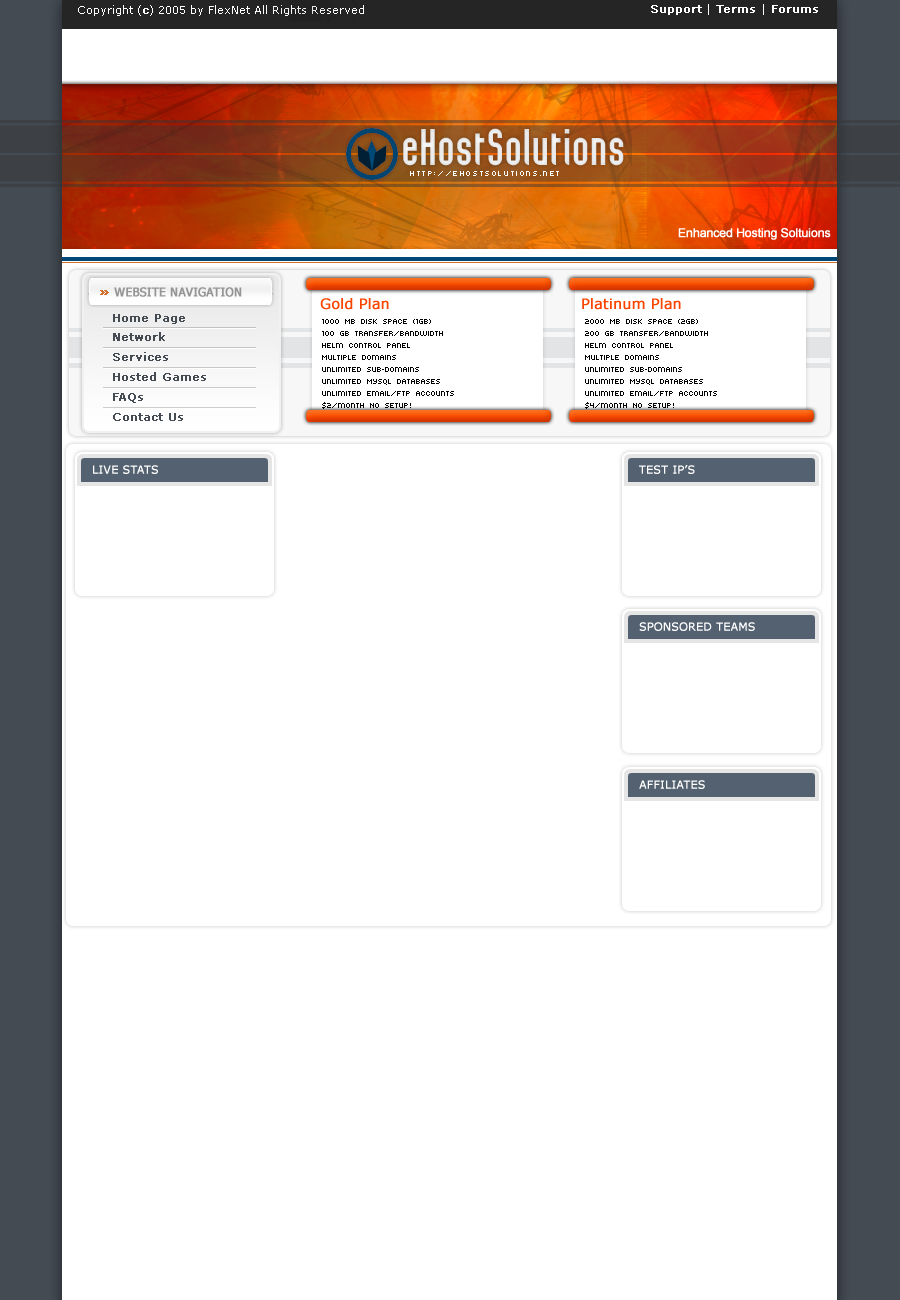
<style>
.page{position:relative;width:900px;height:1300px;background:#ffffff}
.page>*{position:absolute;margin:0}
.t1{font:11px "Verdana";color:#ffffff}
.t2{font:11px "Verdana";color:#ffffff;font-weight:bold}
.t3{font:36px "Roundy-Regular";color:#ffffff}
.t4{font:10px "kroeger 05_55";letter-spacing:0.16em;color:#ffffff}
.t5{font:12px "kroeger 05_55";color:#ffffff;font-weight:bold}
.t6{font:12px "Tahoma";color:#959595;font-weight:bold}
.t7{font:14px "Verdana";color:#fa4400;font-weight:bold}
.t8{font:11px/19.9px "Verdana";color:#444b53;font-weight:bold}
.t9{font:10px "kroeger 05_55";color:#000000}
</style>
<div class="page">
<p class="t1" style="left:78px;top:5px;width:286px;height:11px">Copyright (<span class="t2">c</span>) 2005 by FlexNet All Rights Reserved</p>
<p class="t2" style="left:651px;top:4px;width:167px;height:11px">Support<span class="t1"> |</span> Terms <span class="t1">|</span> Forums</p>
<p class="t3" style="left:403px;top:128px;width:221px;height:38px">eHostSolutions</p>
<p class="t4" style="left:410px;top:171px;width:149px;height:5px">http://ehostsolutions.net</p>
<p class="t5" style="left:678px;top:228px;width:153px;height:12px">Enhanced Hosting Soltuions</p>
<p class="t6" style="left:114px;top:287px;width:128px;height:10px">WEBSITE NAVIGATION</p>
<p class="t7" style="left:320px;top:298px;width:69px;height:12px">Gold Plan</p>
<p class="t7" style="left:582px;top:298px;width:99px;height:12px">Platinum Plan</p>
<p class="t8" style="left:113px;top:314px;width:93px;height:107px">Home Page<br>Network<br>Services<br>Hosted Games<br>FAQs<br>Contact Us</p>
<p class="t9" style="left:322px;top:319px;width:132px;height:90px">1000 MB Disk space (1GB)<br>100 GB Transfer/Bandwidth<br>Helm Control PAnel<br>Multiple Domains<br>Unlimited Sub-domains<br>Unlimited Mysql Databases<br>Unlimited Email/FTP Accounts<br>$2/month No setup!</p>
<p class="t9" style="left:585px;top:319px;width:132px;height:90px">2000 MB Disk space (2GB)<br>200 GB Transfer/Bandwidth<br>Helm Control PAnel<br>Multiple Domains<br>Unlimited Sub-domains<br>Unlimited Mysql Databases<br>Unlimited Email/FTP Accounts<br>$4/month No setup!</p>
<p class="t2" style="left:93px;top:465px;width:65px;height:9px">LIVE STATS</p>
<p class="t2" style="left:639px;top:465px;width:56px;height:9px">TEST IP’S</p>
<p class="t2" style="left:639px;top:622px;width:116px;height:9px">SPONSORED TEAMS</p>
<p class="t2" style="left:639px;top:780px;width:66px;height:9px">AFFILIATES</p>
</div>
